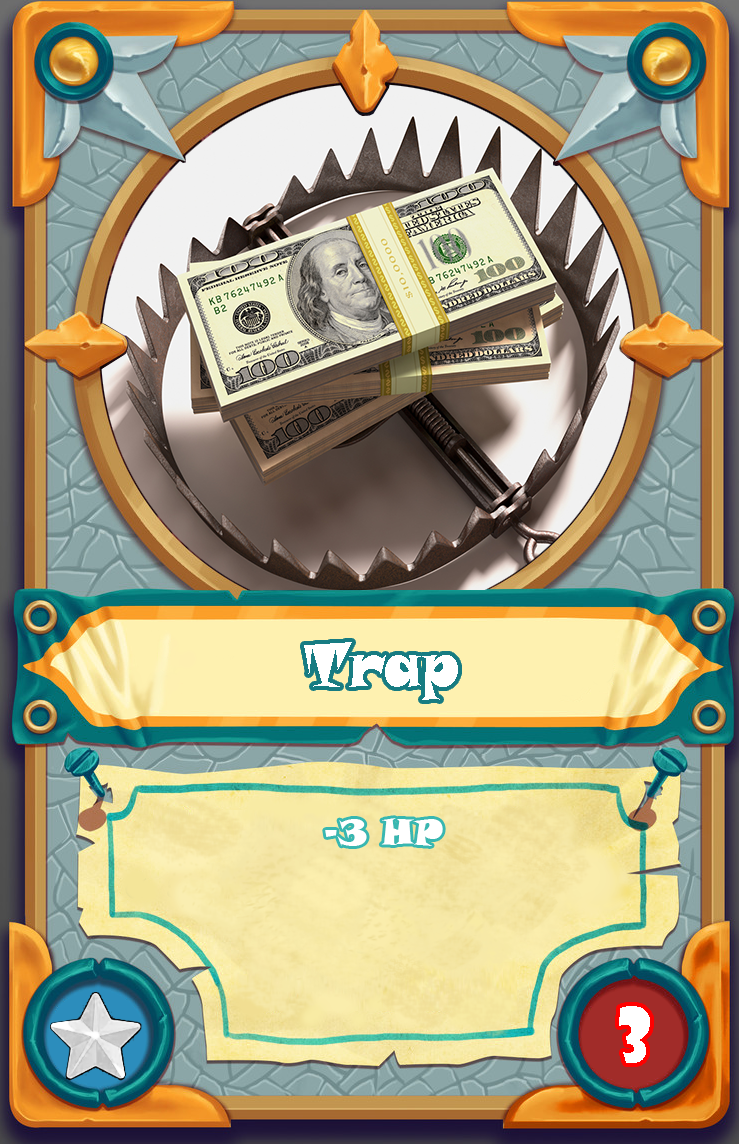
<style>
.page{position:relative;width:739px;height:1144px}
.page>*{position:absolute;margin:0}
.t1{font:60px "SnapITC-Regular";color:#ffffff}
.t2{font:36px "SnapITC-Regular";color:#ffffff}
.t3{font:72px "ShowcardGothic-Reg";color:#ffffff}
</style>
<div class="page">
<p class="t1" style="left:304px;top:642px;width:154px;height:58px">Trap</p>
<p class="t2" style="left:325px;top:818px;width:118px;height:28px">-3 HP</p>
<p class="t3" style="left:619px;top:1006px;width:31px;height:57px">3</p>
</div>
